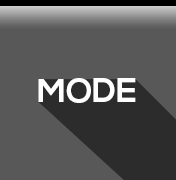
<style>
.page{position:relative;width:176px;height:180px;background:#585858}
.page>*{position:absolute;margin:0}
.t1{font:33.6px "NexaBold";color:#ffffff}
</style>
<div class="page">
<p class="t1" style="left:38px;top:78px;width:98px;height:25px">MODE</p>
</div>
